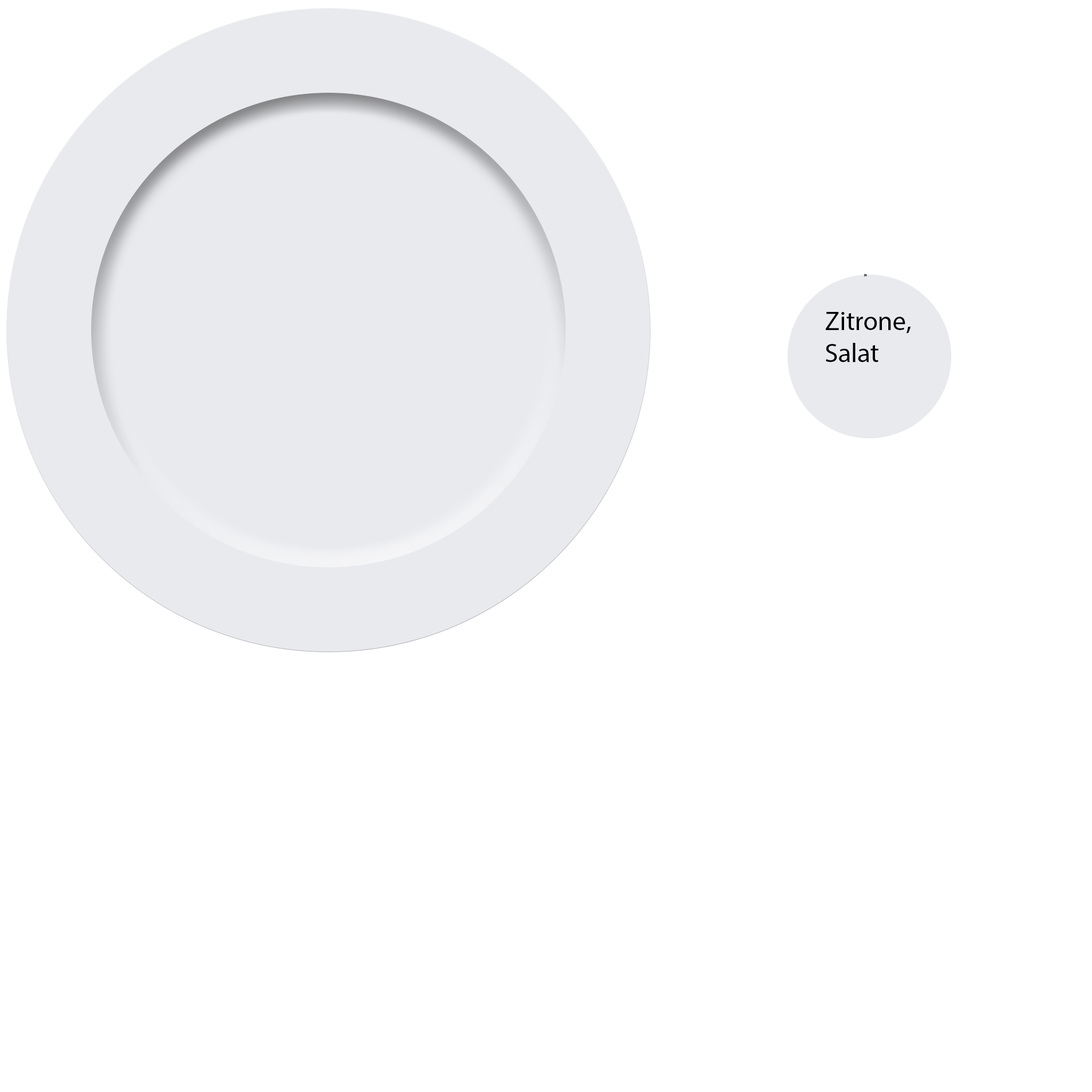
<style>
.page{position:relative;width:1092px;height:1092px;background:#ffffff}
.page>*{position:absolute;margin:0}
.t1{font:2.6px "MyriadPro-Regular";color:#000000}
.t2{font:26.7px "MyriadPro-Regular";color:#000000}
</style>
<div class="page">
<p class="t1" style="left:864px;top:274px;width:3px;height:2px">Zit</p>
<p class="t2" style="left:825px;top:312px;width:86px;height:50px">Zitrone, Salat</p>
</div>
